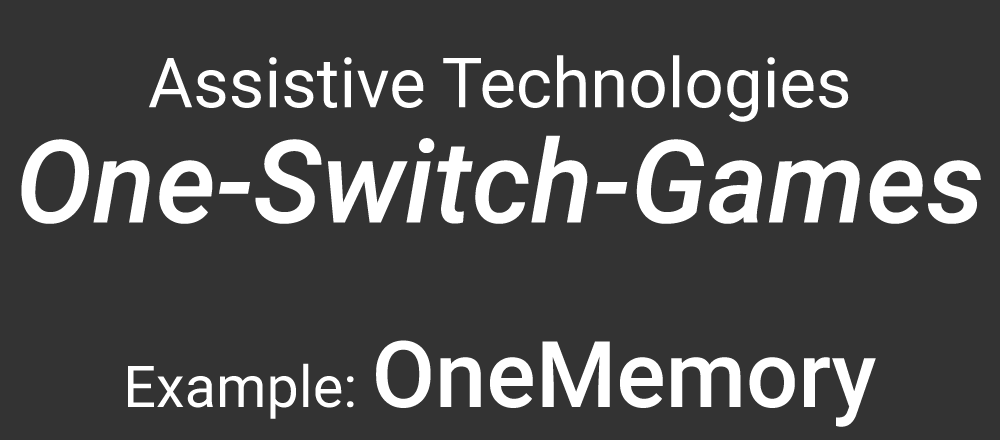
<style>
.page{position:relative;width:1000px;height:440px;background:#333333}
.page>*{position:absolute;margin:0}
.t1{font:69.2px/69.2px "Roboto-Regular";color:#ffffff}
.t2{font:115.3px/115.3px "Roboto-MediumItalic";color:#ffffff}
.t3{font:57.6px/92.2px "Roboto-Regular";color:#ffffff}
.t4{font:92.2px/92.2px "Roboto-Medium";color:#ffffff}
</style>
<div class="page">
<p class="t1" style="left:21px;top:55px;width:960px;height:372px;text-align:center">Assistive Technologies<br><span class="t2">One-Switch-Games<br><br></span><span class="t3">Example: </span><span class="t4">OneMemory</span></p>
</div>
